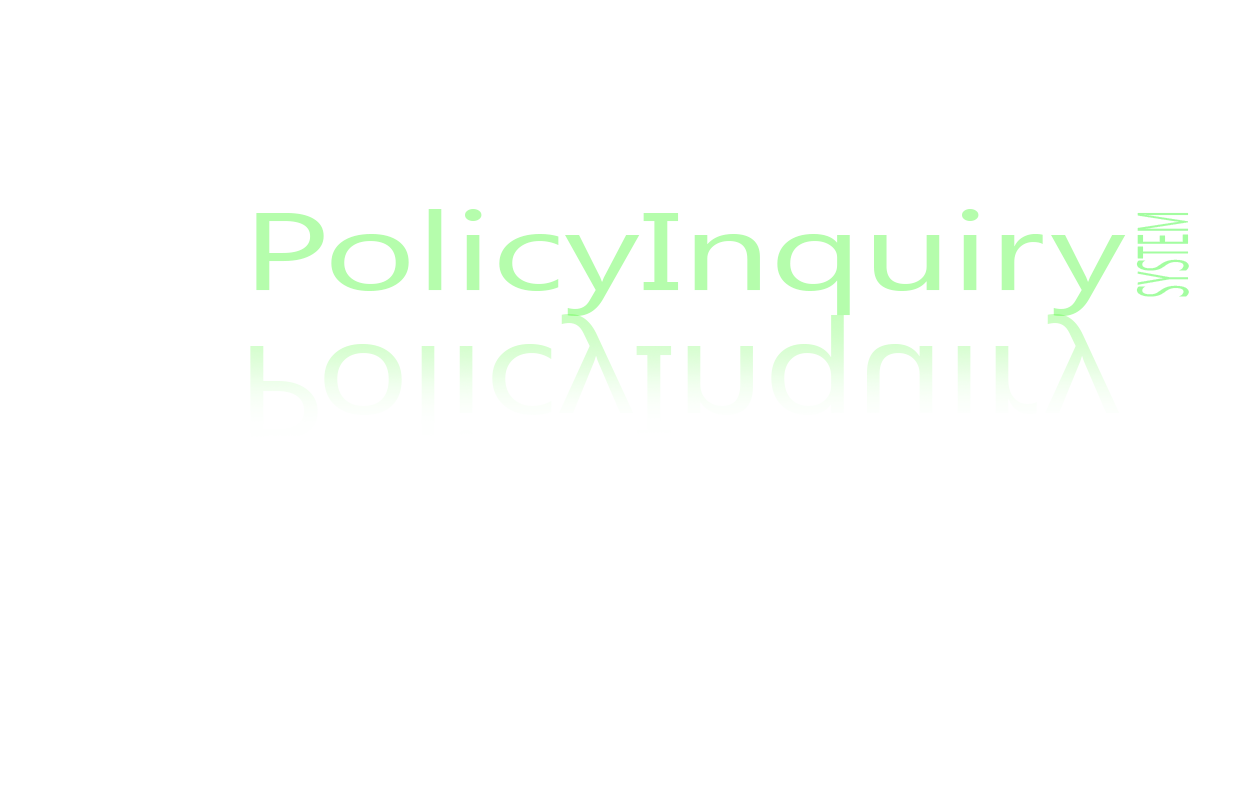
<style>
.page{position:relative;width:1250px;height:800px;background:#ffffff}
.page>*{position:absolute;margin:0}
.t1{font:109.9px "SegoeUI";color:#b5fdac;scale:1.43 1}
.t2{font:71.7px "SegoeUI";color:#a3fda0;scale:0.34 1}
</style>
<div class="page">
<p class="t1" style="left:256px;top:209px;width:870px;height:107px">PolicyInquiry</p>
<p class="t2" style="left:1136px;top:212px;width:53px;height:85px;rotate:-90deg">SYSTEM</p>
</div>
